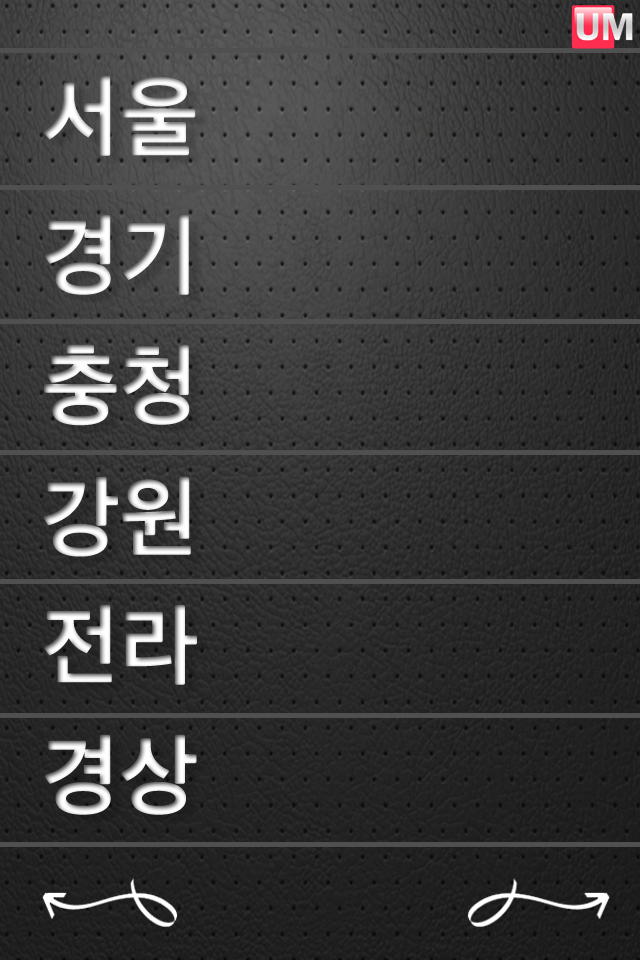
<style>
.page{position:relative;width:640px;height:960px}
.page>*{position:absolute;margin:0}
.t1{font:83.3px "AppleGothic";font-weight:bold}
</style>
<div class="page">
<p class="t1" style="left:44px;top:75px;width:152px;height:81px">서울</p>
<p class="t1" style="left:44px;top:214px;width:145px;height:81px">경기</p>
<p class="t1" style="left:44px;top:344px;width:146px;height:82px">충청</p>
<p class="t1" style="left:43px;top:476px;width:148px;height:81px">강원</p>
<p class="t1" style="left:44px;top:604px;width:153px;height:81px">전라</p>
<p class="t1" style="left:44px;top:734px;width:153px;height:81px">경상</p>
</div>
